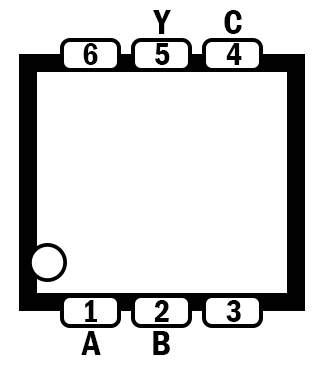
<style>
.page{position:relative;width:326px;height:372px;background:#ffffff}
.page>*{position:absolute;margin:0}
.t1{font:36px "FranklinGothic-DemiCond";color:#000000}
.t2{font:32px "FranklinGothic-DemiCond";color:#000000}
</style>
<div class="page">
<p class="t1" style="left:153px;top:10px;width:18px;height:24px">Y</p>
<p class="t1" style="left:224px;top:10px;width:18px;height:24px">C</p>
<p class="t2" style="left:83px;top:43px;width:15px;height:22px">6</p>
<p class="t2" style="left:155px;top:43px;width:15px;height:22px">5</p>
<p class="t2" style="left:226px;top:43px;width:16px;height:22px">4</p>
<p class="t2" style="left:85px;top:300px;width:12px;height:22px">1</p>
<p class="t2" style="left:154px;top:300px;width:15px;height:22px">2</p>
<p class="t2" style="left:226px;top:300px;width:15px;height:22px">3</p>
<p class="t1" style="left:81px;top:331px;width:20px;height:24px">A</p>
<p class="t1" style="left:153px;top:331px;width:17px;height:24px">B</p>
</div>
